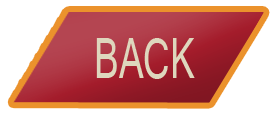
<style>
.page{position:relative;width:274px;height:115px;background:#ffffff}
.page>*{position:absolute;margin:0}
.t1{font:59.7px "Shruti";color:#ded7bd;scale:0.67 1}
</style>
<div class="page">
<p class="t1" style="left:96px;top:38px;width:99px;height:41px">BACK</p>
</div>
